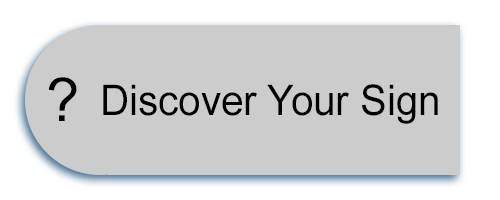
<style>
.page{position:relative;width:500px;height:200px;background:#cccccc}
.page>*{position:absolute;margin:0}
.t1{font:60px "ArialMT";color:#000000}
.t2{font:42px "ArialMT";color:#000000;scale:0.96 1}
</style>
<div class="page">
<p class="t1" style="left:48px;top:77px;width:29px;height:44px">?</p>
<p class="t2" style="left:103px;top:84px;width:335px;height:40px">Discover Your Sign</p>
</div>
